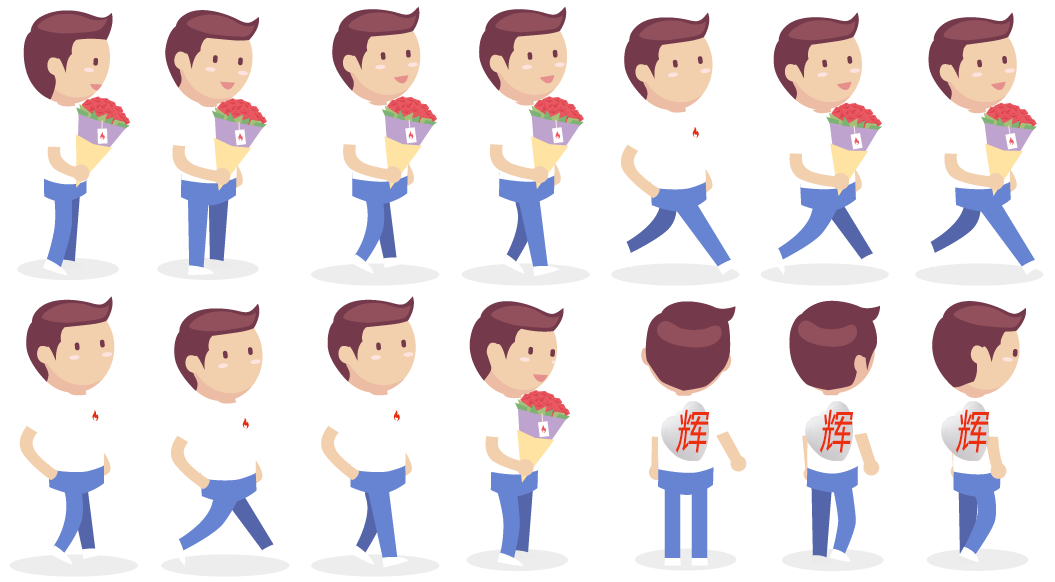
<style>
.page{position:relative;width:1055px;height:582px;background:#ffffff}
.page>*{position:absolute;margin:0}
.t1{font:44.9px "MicrosoftYaHei";color:#ed2e0d;font-style:italic;scale:0.67 1}
</style>
<div class="page">
<p class="t1" style="left:675px;top:409px;width:34px;height:44px">辉</p>
<p class="t1" style="left:819px;top:409px;width:34px;height:44px">辉</p>
<p class="t1" style="left:955px;top:409px;width:34px;height:44px">辉</p>
</div>
